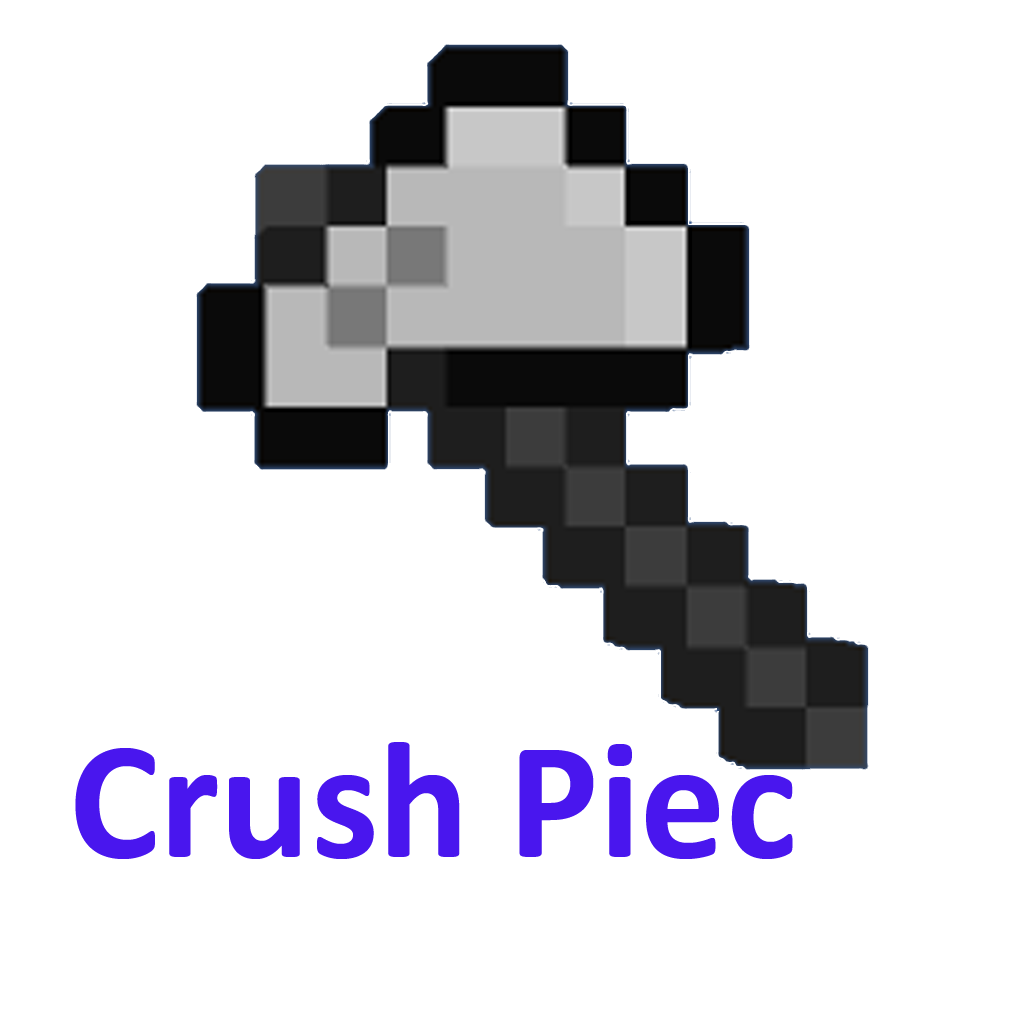
<style>
.page{position:relative;width:1024px;height:1024px;background:#ffffff}
.page>*{position:absolute;margin:0}
.t1{font:170px "Calibri-Bold";color:#4916ee}
</style>
<div class="page">
<p class="t1" style="left:75px;top:742px;width:718px;height:117px">Crush Piec</p>
</div>
